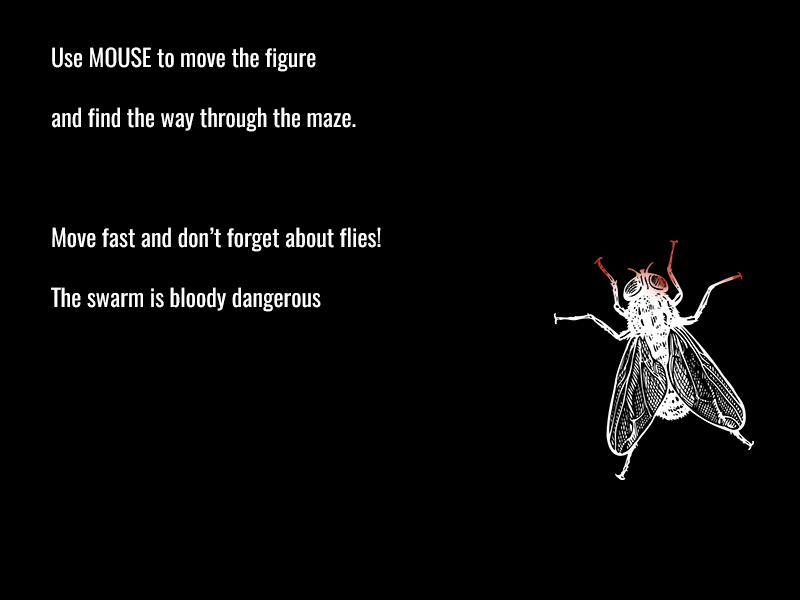
<style>
.page{position:relative;width:800px;height:600px;background:#000000}
.page>*{position:absolute;margin:0}
.t1{font:24px/60px "Oswald-Regular";color:#ffffff}
</style>
<div class="page">
<p class="t1" style="left:51px;top:47px;width:330px;height:265px">Use MOUSE to move the figure<br>and find the way through the maze.<br><br>Move fast and don’t forget about flies!<br>The swarm is bloody dangerous</p>
</div>
